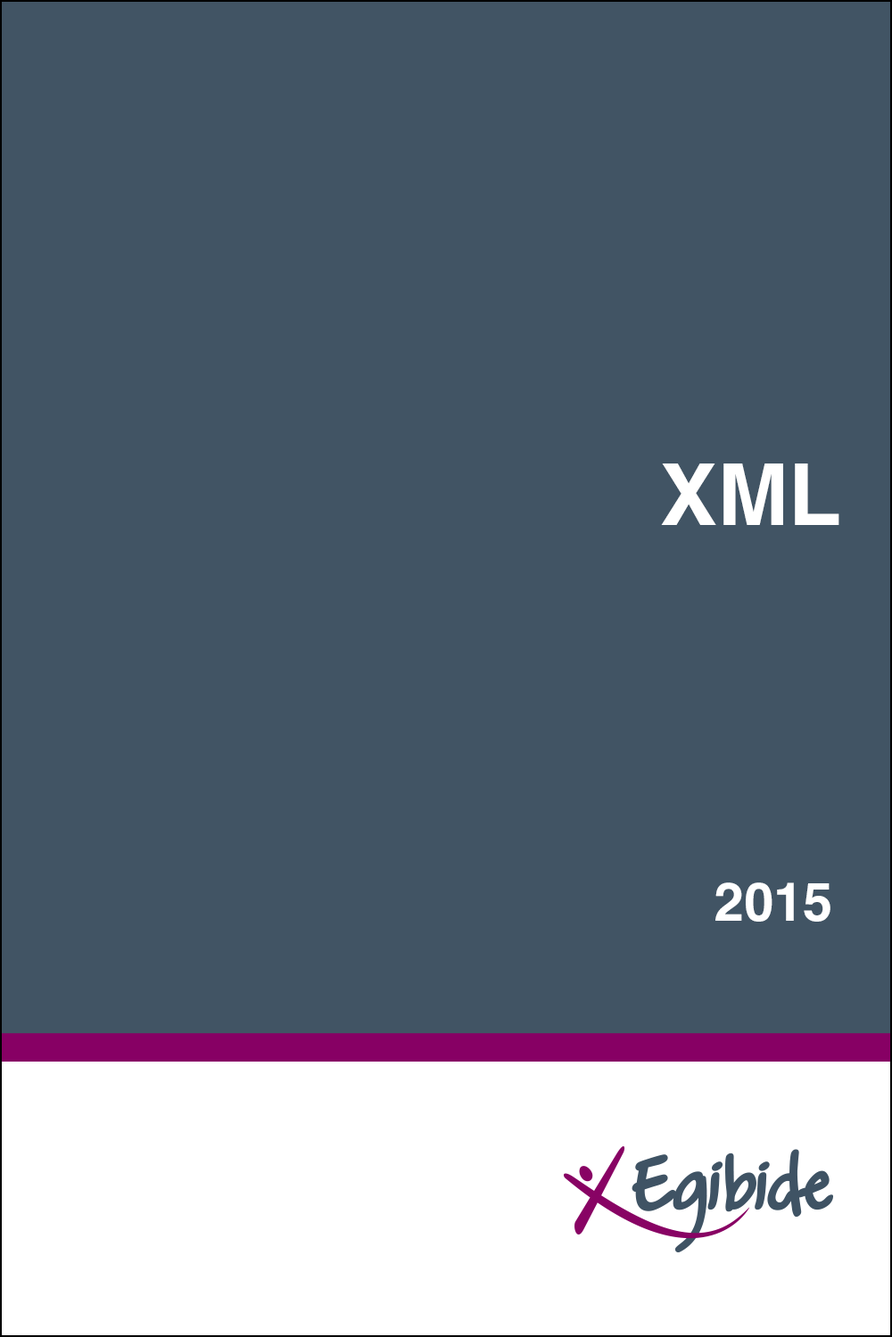
<style>
.page{position:relative;width:892px;height:1337px;background:#415464}
.page>*{position:absolute;margin:0}
.t1{font:85.6px "Helvetica-Bold";color:#ffffff}
.t2{font:53.5px "Helvetica-Bold";color:#ffffff}
</style>
<div class="page">
<p class="t1" style="left:661px;top:464px;width:178px;height:61px">XML</p>
<p class="t2" style="left:715px;top:883px;width:115px;height:39px">2015</p>
</div>
